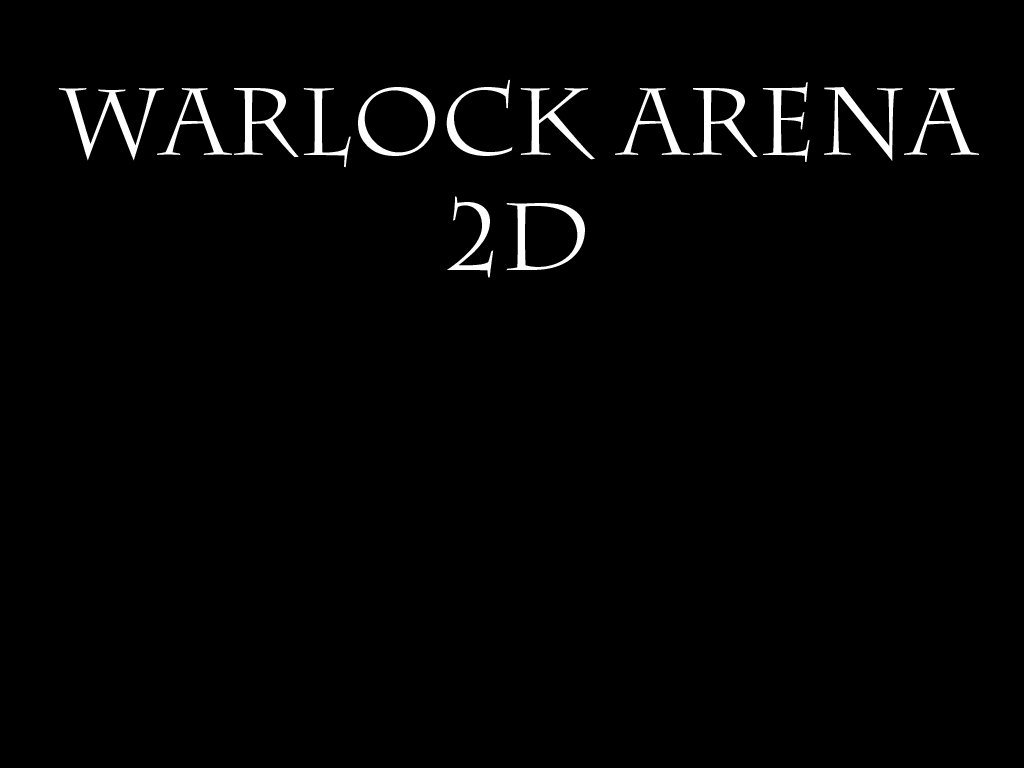
<style>
.page{position:relative;width:1024px;height:768px;background:#000000}
.page>*{position:absolute;margin:0}
.t1{font:96px "CharlemagneStd-Regular";color:#ffffff}
</style>
<div class="page">
<p class="t1" style="left:58px;top:79px;width:921px;height:199px;text-align:center">Warlock Arena<br>2D</p>
</div>
